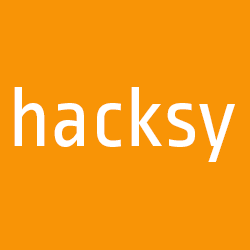
<style>
.page{position:relative;width:250px;height:250px;background:#f89406}
.page>*{position:absolute;margin:0}
.t1{font:86px "RopaSans-Regular";color:#ffffff}
</style>
<div class="page">
<p class="t1" style="left:14px;top:87px;width:221px;height:75px">hacksy</p>
</div>
